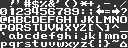
<style>
.page{position:relative;width:128px;height:48px;background:#333333}
.page>*{position:absolute;margin:0}
.t1{font:8px "MegaMan-2";color:#ffffff}
</style>
<div class="page">
<p class="t1" style="left:10px;top:0px;width:4px;height:7px">!</p>
<p class="t1" style="left:17px;top:0px;width:2px;height:4px">“</p>
<p class="t1" style="left:32px;top:0px;width:7px;height:8px">$</p>
<p class="t1" style="left:120px;top:1px;width:6px;height:6px">/</p>
<p class="t1" style="left:0px;top:8px;width:7px;height:7px">0</p>
<p class="t1" style="left:8px;top:16px;width:7px;height:7px">A</p>
<p class="t1" style="left:10px;top:8px;width:4px;height:7px">1</p>
<p class="t1" style="left:16px;top:16px;width:7px;height:7px">B</p>
<p class="t1" style="left:16px;top:8px;width:7px;height:7px">2</p>
<p class="t1" style="left:24px;top:16px;width:7px;height:7px">c</p>
<p class="t1" style="left:24px;top:8px;width:7px;height:7px">3</p>
<p class="t1" style="left:32px;top:16px;width:7px;height:7px">d</p>
<p class="t1" style="left:32px;top:8px;width:7px;height:7px">4</p>
<p class="t1" style="left:40px;top:16px;width:7px;height:7px">e</p>
<p class="t1" style="left:40px;top:8px;width:7px;height:7px">5</p>
<p class="t1" style="left:48px;top:16px;width:7px;height:7px">f</p>
<p class="t1" style="left:48px;top:8px;width:7px;height:7px">6</p>
<p class="t1" style="left:56px;top:16px;width:7px;height:7px">g</p>
<p class="t1" style="left:56px;top:8px;width:7px;height:7px">7</p>
<p class="t1" style="left:64px;top:16px;width:7px;height:7px">h</p>
<p class="t1" style="left:64px;top:8px;width:7px;height:7px">8</p>
<p class="t1" style="left:72px;top:8px;width:7px;height:7px">9</p>
<p class="t1" style="left:81px;top:16px;width:5px;height:7px">j</p>
<p class="t1" style="left:82px;top:9px;width:2px;height:5px">:</p>
<p class="t1" style="left:88px;top:16px;width:6px;height:7px">k</p>
<p class="t1" style="left:90px;top:9px;width:2px;height:6px">;</p>
<p class="t1" style="left:96px;top:16px;width:6px;height:7px">l</p>
<p class="t1" style="left:96px;top:8px;width:8px;height:7px">&lt;</p>
<p class="t1" style="left:104px;top:16px;width:7px;height:7px">M</p>
<p class="t1" style="left:105px;top:10px;width:5px;height:3px">=</p>
<p class="t1" style="left:112px;top:16px;width:7px;height:7px">N</p>
<p class="t1" style="left:112px;top:8px;width:8px;height:7px">&gt;</p>
<p class="t1" style="left:120px;top:16px;width:7px;height:7px">O</p>
<p class="t1" style="left:121px;top:8px;width:6px;height:7px">?</p>
<p class="t1" style="left:0px;top:24px;width:7px;height:7px">p</p>
<p class="t1" style="left:8px;top:24px;width:7px;height:7px">q</p>
<p class="t1" style="left:16px;top:24px;width:7px;height:7px">r</p>
<p class="t1" style="left:24px;top:24px;width:7px;height:7px">s</p>
<p class="t1" style="left:33px;top:24px;width:6px;height:7px">t</p>
<p class="t1" style="left:40px;top:24px;width:7px;height:7px">u</p>
<p class="t1" style="left:48px;top:24px;width:7px;height:7px">v</p>
<p class="t1" style="left:56px;top:24px;width:7px;height:7px">w</p>
<p class="t1" style="left:65px;top:24px;width:6px;height:7px">x</p>
<p class="t1" style="left:73px;top:24px;width:6px;height:7px">Y</p>
<p class="t1" style="left:80px;top:24px;width:6px;height:7px">z</p>
</div>
